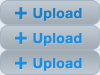
<style>
.page{position:relative;width:100px;height:75px}
.page>*{position:absolute;margin:0}
.t1{font:14px "HelveticaNeue-Bold";letter-spacing:0.025em;color:#1d7fc6}
.t2{font:23px "HelveticaNeue-Bold";letter-spacing:0.025em;color:#1d7fc6}
.t3{font:14px "HelveticaNeue-Bold";letter-spacing:0.025em;color:#178fe6}
.t4{font:23px "HelveticaNeue-Bold";letter-spacing:0.025em;color:#178fe6}
</style>
<div class="page">
<p class="t1" style="left:15px;top:7px;width:67px;height:14px"><span class="t2">+ </span>Upload</p>
<p class="t3" style="left:15px;top:32px;width:67px;height:14px"><span class="t4">+ </span>Upload</p>
<p class="t3" style="left:15px;top:57px;width:67px;height:14px"><span class="t4">+ </span>Upload</p>
</div>
